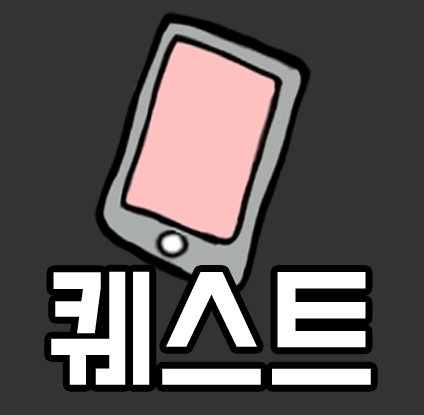
<style>
.page{position:relative;width:424px;height:415px;background:#333333}
.page>*{position:absolute;margin:0}
.t1{font:119.3px "BMDoHyeon";color:#ffffff;scale:0.96 1}
</style>
<div class="page">
<p class="t1" style="left:51px;top:271px;width:320px;height:114px">퀘스트</p>
</div>
